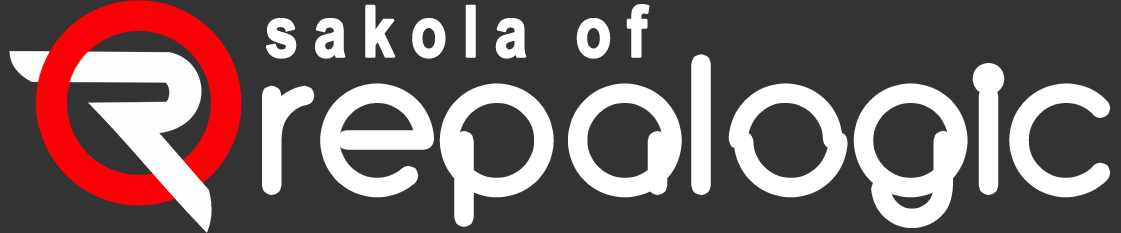
<style>
.page{position:relative;width:1121px;height:233px;background:#333333}
.page>*{position:absolute;margin:0}
.t1{font:71px "ArialNarrow-Bold";letter-spacing:0.2em;color:#ffffff;font-weight:bold}
.t2{font:185.6px "CircleD";letter-spacing:0.075em;color:#ffffff;font-weight:bold}
</style>
<div class="page">
<p class="t1" style="left:265px;top:4px;width:385px;height:55px">sakola of</p>
<p class="t2" style="left:268px;top:60px;width:837px;height:162px">REPALOGIC</p>
</div>
